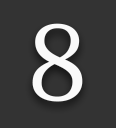
<style>
.page{position:relative;width:116px;height:128px;background:#333333}
.page>*{position:absolute;margin:0}
.t1{font:102px "KoPubWorldBatangMedium";color:#fafafa}
</style>
<div class="page">
<p class="t1" style="left:32px;top:23px;width:51px;height:79px">8</p>
</div>
